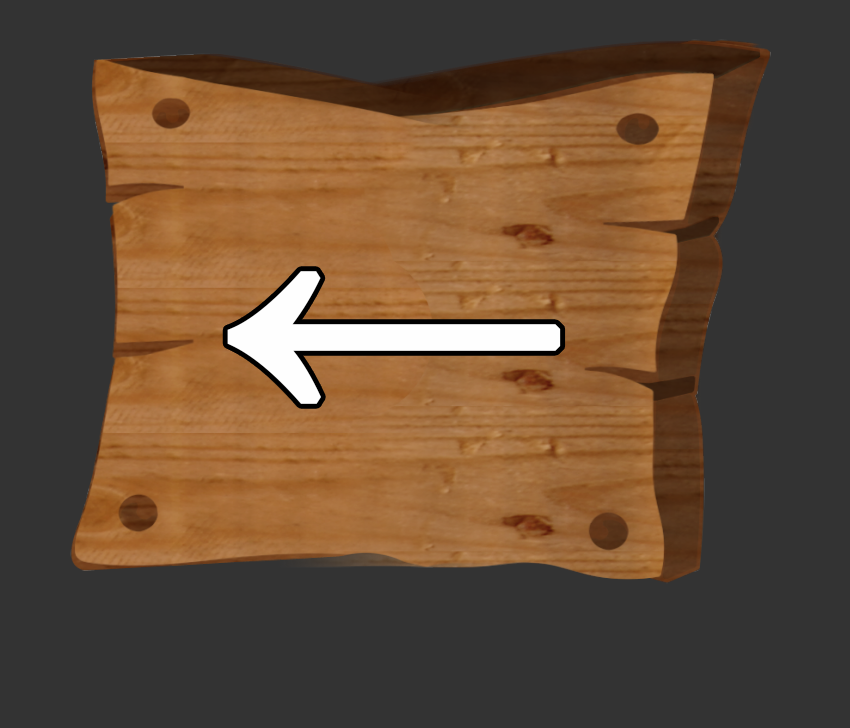
<style>
.page{position:relative;width:850px;height:728px;background:#333333}
.page>*{position:absolute;margin:0}
.t1{font:350px "Century";color:#fefefe;font-weight:bold}
</style>
<div class="page">
<p class="t1" style="left:227px;top:271px;width:334px;height:133px">←</p>
</div>
